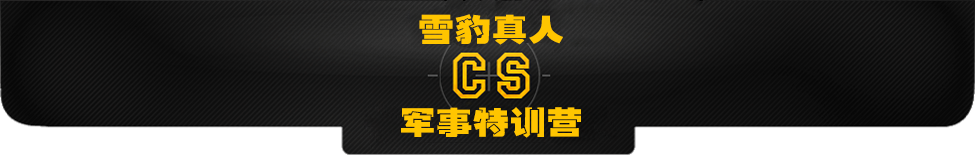
<style>
.page{position:relative;width:980px;height:155px}
.page>*{position:absolute;margin:0}
.t1{font:32px "JFangDie";color:#ffc500;scale:1.15 1}
</style>
<div class="page">
<p class="t1" style="left:419px;top:14px;width:144px;height:31px">雪豹真人</p>
<p class="t1" style="left:401px;top:107px;width:180px;height:31px">军事特训营</p>
</div>
